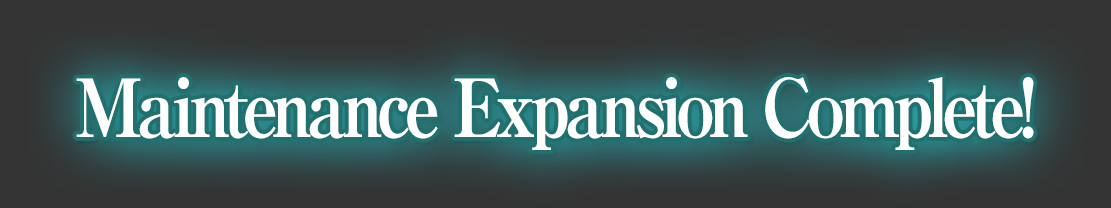
<style>
.page{position:relative;width:1111px;height:208px;background:#333333}
.page>*{position:absolute;margin:0}
.t1{font:80px "RyuminPro-ExBold";letter-spacing:-0.08em;color:#ffffff;scale:0.9 1}
</style>
<div class="page">
<p class="t1" style="left:76px;top:77px;width:958px;height:73px">Maintenance Expansion Complete!</p>
</div>
